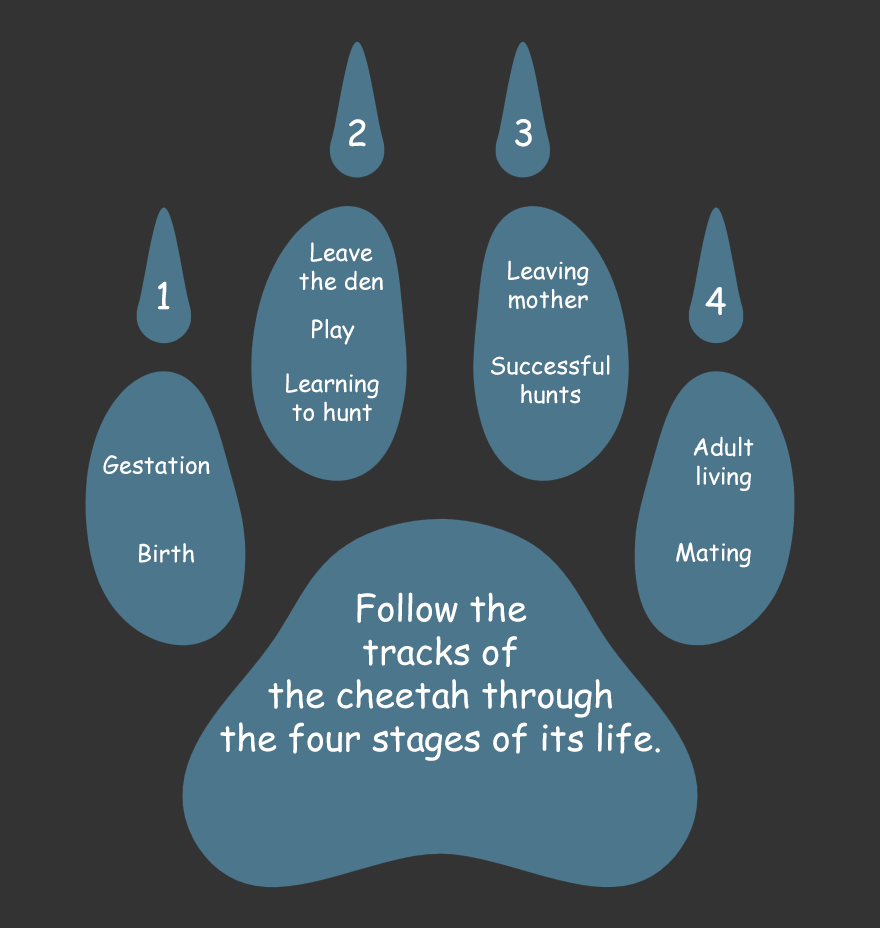
<style>
.page{position:relative;width:880px;height:928px;background:#333333}
.page>*{position:absolute;margin:0}
.t1{font:36px "ComicSansMS";color:#ffffff}
.t2{font:24px "ComicSansMS";color:#ffffff}
</style>
<div class="page">
<p class="t1" style="left:349px;top:119px;width:17px;height:28px">2</p>
<p class="t1" style="left:515px;top:119px;width:17px;height:28px">3</p>
<p class="t2" style="left:299px;top:242px;width:84px;height:48px;text-align:center">Leave<br>the den</p>
<p class="t2" style="left:508px;top:260px;width:81px;height:49px;text-align:center">Leaving<br>mother</p>
<p class="t1" style="left:158px;top:281px;width:12px;height:29px">1</p>
<p class="t1" style="left:705px;top:287px;width:21px;height:28px">4</p>
<p class="t2" style="left:312px;top:319px;width:43px;height:26px">Play</p>
<p class="t2" style="left:491px;top:355px;width:119px;height:49px;text-align:center">Successful<br>hunts</p>
<p class="t2" style="left:286px;top:373px;width:93px;height:49px;text-align:center">Learning<br>to hunt</p>
<p class="t2" style="left:693px;top:436px;width:61px;height:55px;text-align:center">Adult<br>living</p>
<p class="t2" style="left:103px;top:455px;width:107px;height:20px">Gestation</p>
<p class="t2" style="left:139px;top:543px;width:55px;height:20px">Birth</p>
<p class="t2" style="left:676px;top:542px;width:75px;height:26px">Mating</p>
<p class="t1" style="left:220px;top:592px;width:440px;height:169px;text-align:center">Follow the<br>tracks of<br>the cheetah through<br>the four stages of its life.</p>
</div>
